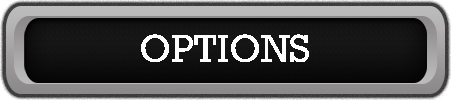
<style>
.page{position:relative;width:451px;height:100px}
.page>*{position:absolute;margin:0}
.t1{font:39.8px "Rockwell";color:#ffffff}
</style>
<div class="page">
<p class="t1" style="left:141px;top:34px;width:168px;height:28px">OPTIONS</p>
</div>
